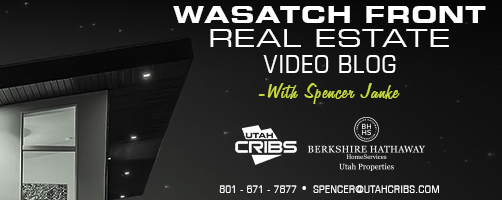
<style>
.page{position:relative;width:502px;height:200px}
.page>*{position:absolute;margin:0}
.t1{font:23.2px "EurostileLT-BoldExtendedTwo";letter-spacing:0.04em;color:#ffffff;text-transform:uppercase}
.t2{font:24.6px "EurostileLT-ExtendedTwo";letter-spacing:0.04em;color:#ffffff;text-transform:uppercase}
.t3{font:24.6px "EurostileLT-Condensed";letter-spacing:0.04em;color:#ffffff;text-transform:uppercase}
.t4{font:24.6px "Freehand575BT-RegularB";letter-spacing:0.04em;color:#c8d93c}
.t5{font:11.3px "EurostileLT-Condensed";letter-spacing:0.04em;color:#ffffff;text-transform:uppercase;scale:0.87 1}
.t6{font:17.7px "MyriadPro-Regular";letter-spacing:0.04em;color:#ffffff;text-transform:uppercase;scale:0.87 1}
.t7{font:11.3px "EurostileLT-Condensed";letter-spacing:0.06em;color:#ffffff;text-transform:uppercase;scale:0.87 1}
</style>
<div class="page">
<p class="t1" style="left:173px;top:6px;width:313px;height:17px">Wasatch Front</p>
<p class="t2" style="left:210px;top:29px;width:239px;height:18px">reAL eSTATE</p>
<p class="t3" style="left:263px;top:55px;width:133px;height:18px">VIDEO bLOG</p>
<p class="t4" style="left:258px;top:83px;width:142px;height:21px">-With Spencer Janke</p>
<p class="t5" style="left:219px;top:185px;width:87px;height:8px">801 - 671 - 7877 <span class="t6">•</span></p>
<p class="t7" style="left:313px;top:185px;width:126px;height:8px">Spencer@utahcribs.com</p>
</div>
